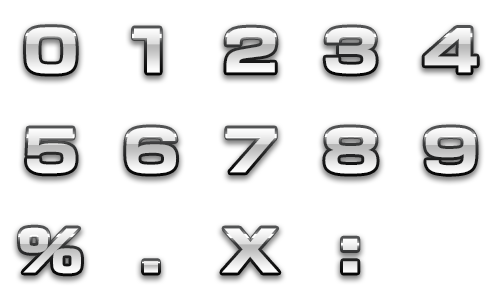
<style>
.page{position:relative;width:500px;height:300px;background:#ffffff}
.page>*{position:absolute;margin:0}
.t1{font:54px "NewRodinPro-EB";letter-spacing:0.3em;color:#ebebeb;text-transform:uppercase;scale:1.25 1}
.t2{font:54px "NewRodinPro-EB";letter-spacing:0.3em;color:#ededed;text-transform:uppercase;scale:1.25 1}
.t3{font:54px "NewRodinPro-EB";letter-spacing:0.3em;text-transform:uppercase;scale:1.25 1}
.t4{font:54px "NewRodinPro-EB";letter-spacing:0.3em;color:#f0f0f0;text-transform:uppercase;scale:1.25 1}
.t5{font:54px "NewRodinPro-EB";letter-spacing:0.3em;color:#e9e9e9;text-transform:uppercase;scale:1.25 1}
.t6{font:54px "NewRodinPro-EB";letter-spacing:0.3em;color:#f1f1f1;text-transform:uppercase;scale:1.25 1}
</style>
<div class="page">
<p class="t1" style="left:26px;top:27px;width:50px;height:47px">0</p>
<p class="t1" style="left:134px;top:28px;width:26px;height:45px">1</p>
<p class="t2" style="left:226px;top:27px;width:50px;height:46px">2</p>
<p class="t2" style="left:325px;top:27px;width:51px;height:47px">3</p>
<p class="t3" style="left:424px;top:28px;width:53px;height:45px">4</p>
<p class="t3" style="left:27px;top:128px;width:49px;height:46px">5</p>
<p class="t3" style="left:126px;top:127px;width:51px;height:47px">6</p>
<p class="t4" style="left:227px;top:128px;width:48px;height:45px">7</p>
<p class="t3" style="left:325px;top:127px;width:52px;height:47px">8</p>
<p class="t3" style="left:425px;top:127px;width:51px;height:47px">9</p>
<p class="t3" style="left:20px;top:227px;width:61px;height:47px">%</p>
<p class="t5" style="left:222px;top:228px;width:57px;height:45px">x</p>
<p class="t6" style="left:343px;top:238px;width:15px;height:35px">:</p>
<p class="t3" style="left:144px;top:261px;width:14px;height:12px">.</p>
</div>
